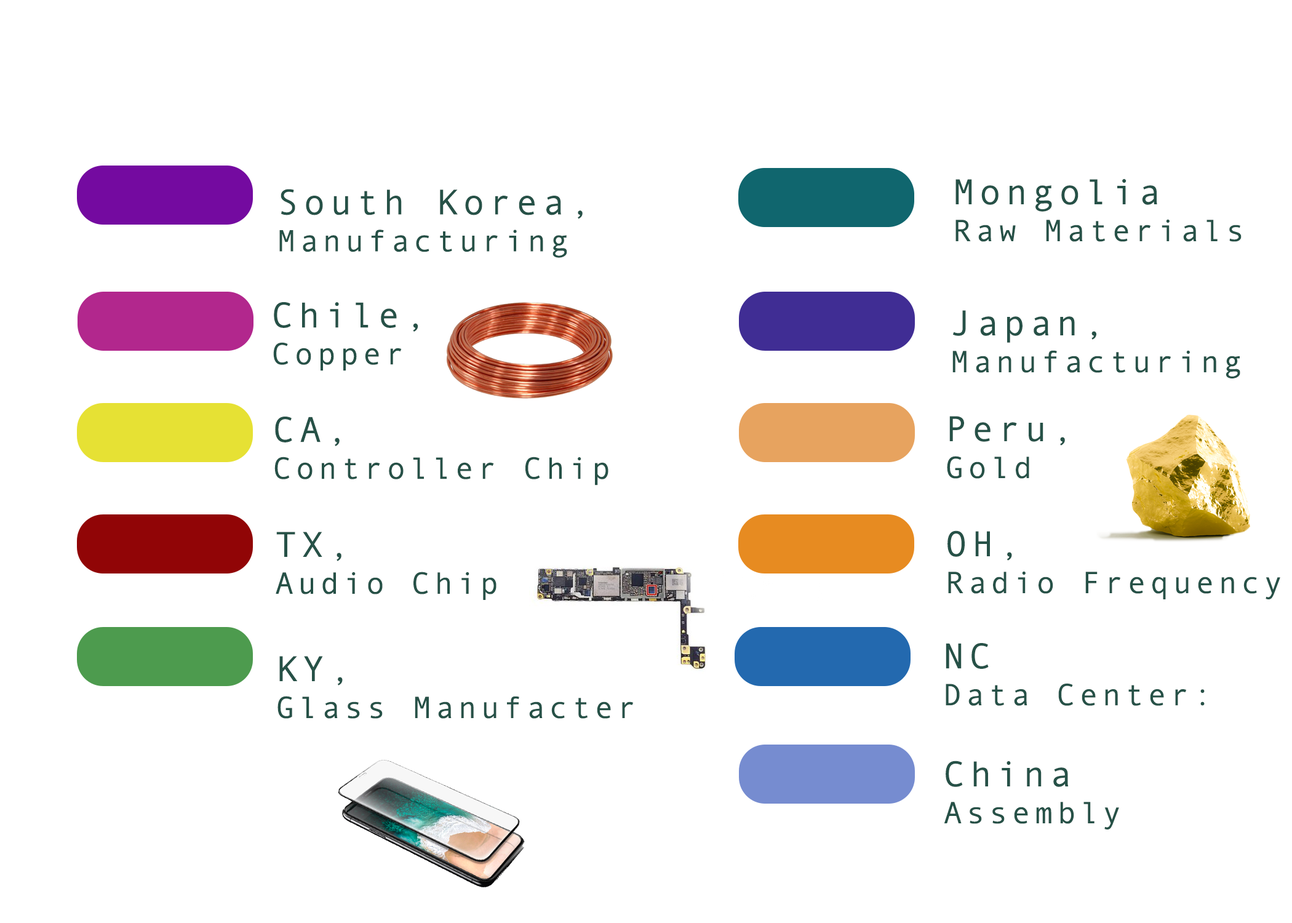
<style>
.page{position:relative;width:1292px;height:923px;background:#ffffff}
.page>*{position:absolute;margin:0}
.t1{font:30.8px "AndaleMono";letter-spacing:0.14em;color:#265147}
.t2{font:35.9px "AndaleMono";letter-spacing:0.14em;color:#265147}
</style>
<div class="page">
<p class="t1" style="left:956px;top:178px;width:286px;height:64px"><span class="t2">Mongolia<br></span>Raw Materials</p>
<p class="t1" style="left:279px;top:189px;width:304px;height:69px"><span class="t2">South Korea,<br></span>Manufacturing</p>
<p class="t2" style="left:273px;top:302px;width:145px;height:69px">Chile,<br><span class="t1">Copper</span></p>
<p class="t1" style="left:952px;top:310px;width:288px;height:68px"><span class="t2">Japan,<br></span>Manufacturing</p>
<p class="t1" style="left:274px;top:417px;width:334px;height:68px"><span class="t2">CA,<br></span>Controller Chip</p>
<p class="t2" style="left:947px;top:416px;width:118px;height:63px">Peru,<br><span class="t1">Gold</span></p>
<p class="t1" style="left:276px;top:532px;width:221px;height:68px"><span class="t2">TX,<br></span>Audio Chip</p>
<p class="t1" style="left:946px;top:643px;width:259px;height:63px"><span class="t2">NC<br></span>Data Center:</p>
<p class="t1" style="left:277px;top:656px;width:356px;height:63px"><span class="t2">KY,<br></span>Glass Manufacter</p>
<p class="t1" style="left:944px;top:760px;width:175px;height:69px"><span class="t2">China<br></span>Assembly</p>
</div>
